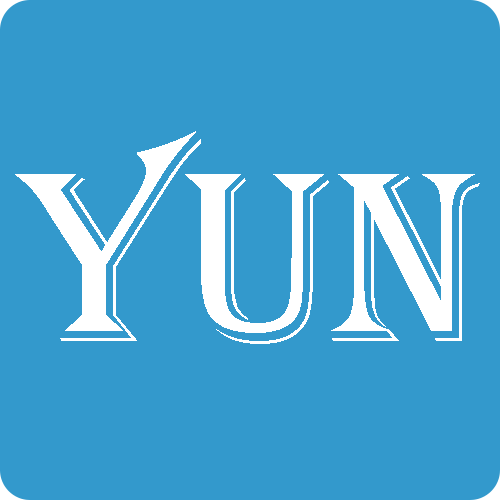
<style>
.page{position:relative;width:500px;height:500px;background:#3399cc}
.page>*{position:absolute;margin:0}
.t1{font:250px "Algerian";color:#ffffff}
</style>
<div class="page">
<p class="t1" style="left:15px;top:131px;width:465px;height:213px">yun</p>
</div>
